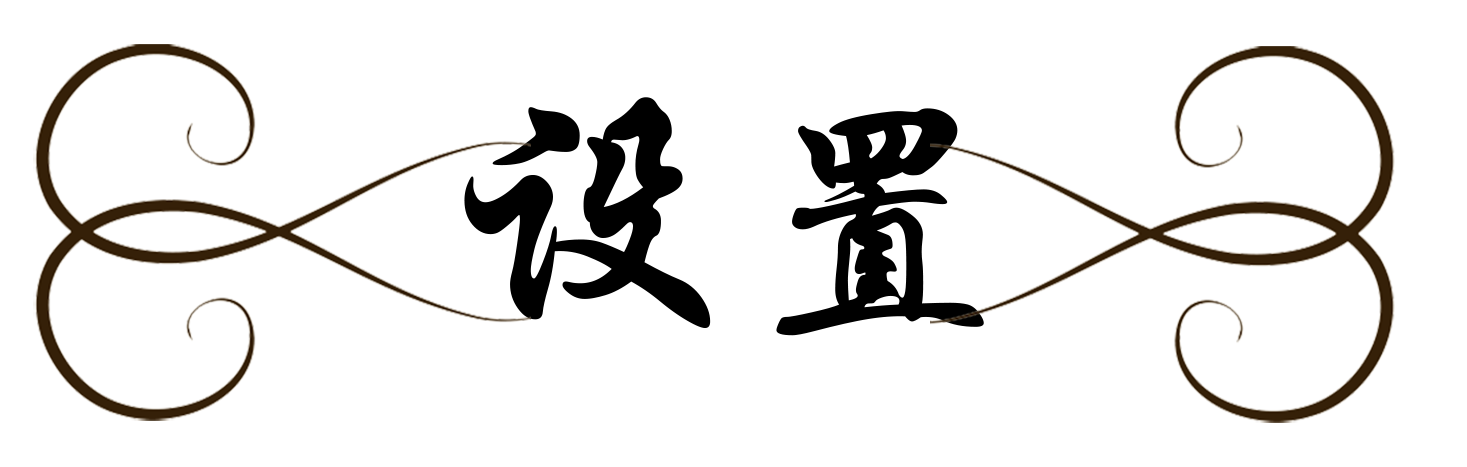
<style>
.page{position:relative;width:1467px;height:467px;background:#ffffff}
.page>*{position:absolute;margin:0}
.t1{font:300px "STXingkai";color:#000000}
</style>
<div class="page">
<p class="t1" style="left:464px;top:97px;width:520px;height:239px">设置</p>
</div>
